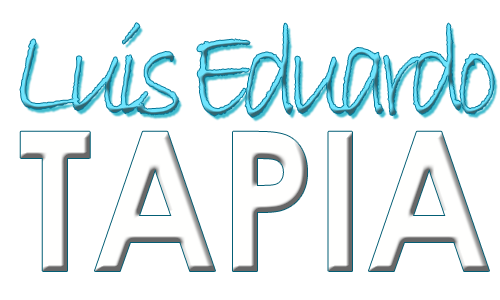
<style>
.page{position:relative;width:500px;height:300px;background:#ffffff}
.page>*{position:absolute;margin:0}
.t1{font:127.8px "BradleyHandITC";letter-spacing:-0.11em;scale:0.83 1}
</style>
<div class="page">
<p class="t1" style="left:20px;top:23px;width:474px;height:94px">Luis Eduardo</p>
</div>
